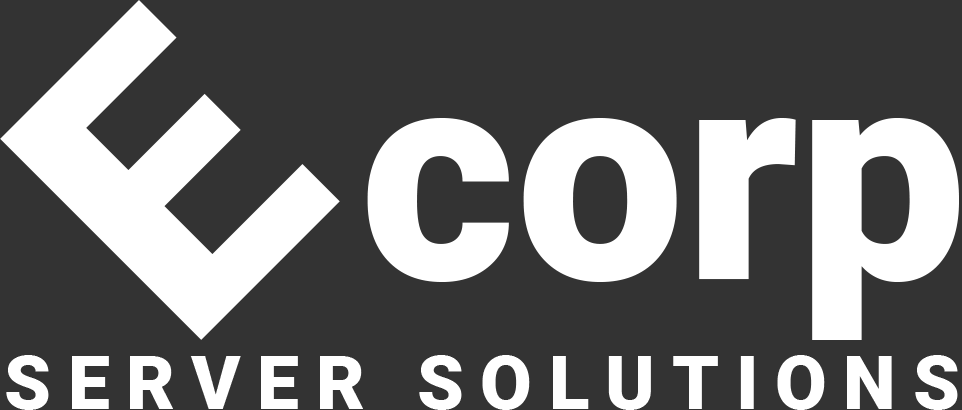
<style>
.page{position:relative;width:962px;height:410px;background:#333333}
.page>*{position:absolute;margin:0}
.t1{font:400px "Roboto-Black";color:#ffffff}
.t2{font:300px "Roboto-Black";color:#ffffff}
.t3{font:75px "Roboto-Black";letter-spacing:0.222em;color:#ffffff}
</style>
<div class="page">
<p class="t1" style="left:0px;top:0px;width:340px;height:340px;rotate:-45deg">E</p>
<p class="t2" style="left:367px;top:118px;width:592px;height:222px">corp</p>
<p class="t3" style="left:6px;top:355px;width:952px;height:55px">SERVER SOLUTIONS</p>
</div>
